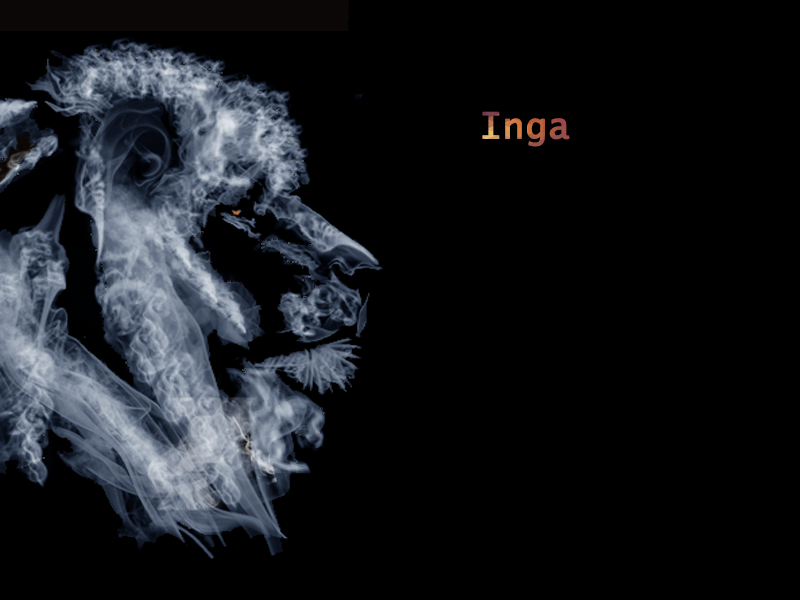
<style>
.page{position:relative;width:800px;height:600px;background:#000000}
.page>*{position:absolute;margin:0}
.t1{font:36px "LucidaSans-Typewriter";font-weight:bold}
</style>
<div class="page">
<p class="t1" style="left:482px;top:111px;width:88px;height:36px">Inga</p>
</div>
